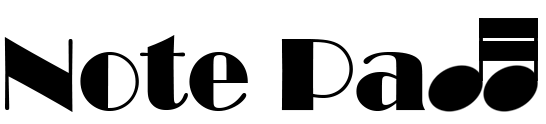
<style>
.page{position:relative;width:546px;height:124px;background:#ffffff}
.page>*{position:absolute;margin:0}
.t1{font:106.1px "Broadway";color:#000000}
</style>
<div class="page">
<p class="t1" style="left:4px;top:35px;width:422px;height:77px">Note Pa</p>
</div>
